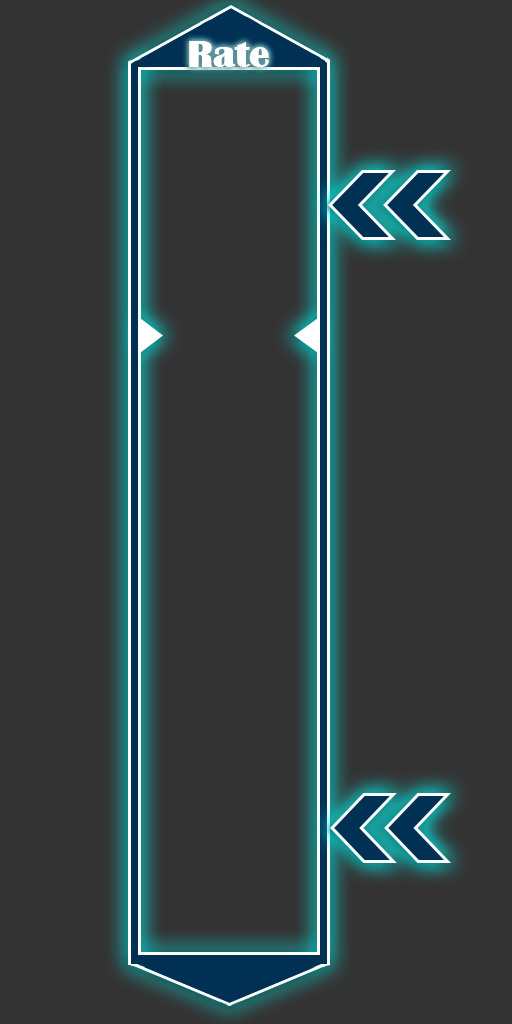
<style>
.page{position:relative;width:512px;height:1024px;background:#333333}
.page>*{position:absolute;margin:0}
.t1{font:36px "Bastion";color:#ffffff}
</style>
<div class="page">
<p class="t1" style="left:189px;top:41px;width:80px;height:26px">Rate</p>
</div>
